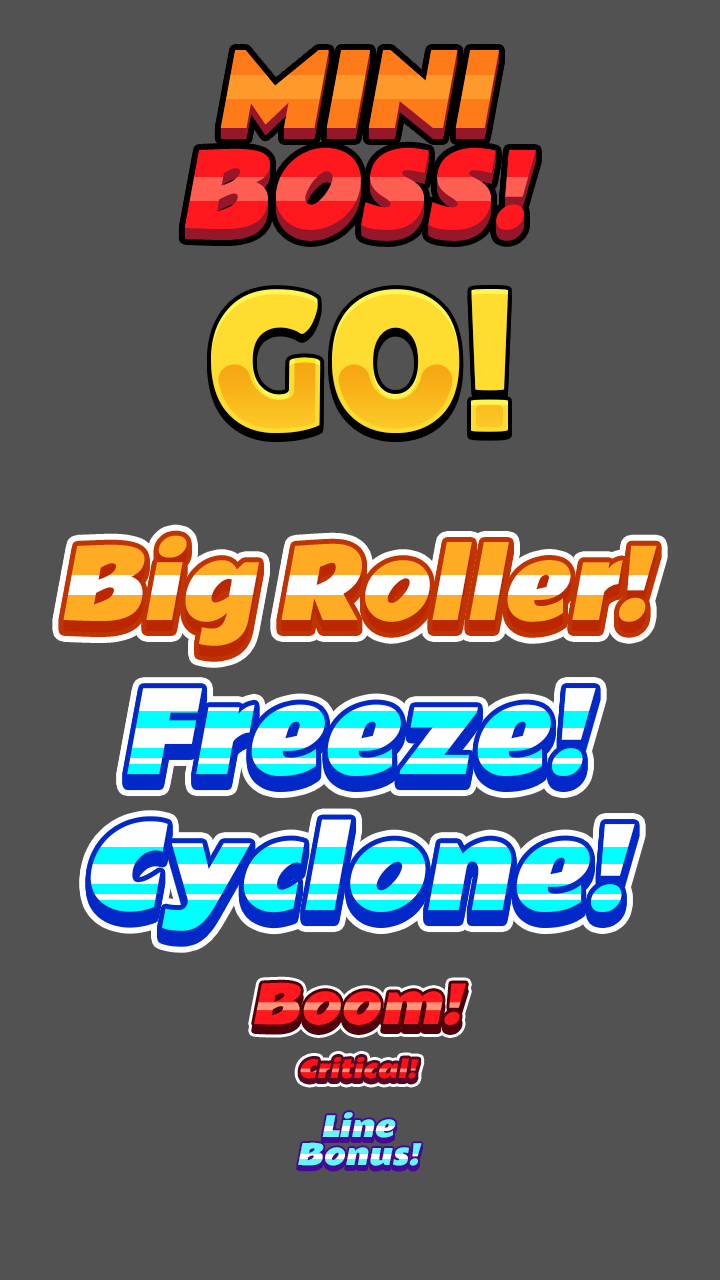
<style>
.page{position:relative;width:720px;height:1280px;background:#535253}
.page>*{position:absolute;margin:0}
.t1{font:100px/100px "RammettoOne-Regular";text-transform:uppercase;font-style:italic;scale:0.95 1}
.t2{font:100px/100px "RammettoOne-Regular";color:#ff191e;text-transform:uppercase;font-style:italic;scale:0.95 1}
.t3{font:100px/100px "RammettoOne-Regular";color:#ff7a19;text-transform:uppercase;font-style:italic;scale:0.95 1}
.t4{font:200.4px "LilitaOne";text-transform:uppercase}
.t5{font:200.4px "LilitaOne";color:#ffdc30;text-transform:uppercase}
.t6{font:95px "RammettoOne-Regular";font-style:italic;scale:0.95 1}
.t7{font:95px "RammettoOne-Regular";color:#ffab23;font-style:italic;scale:0.95 1}
.t8{font:110.1px "RammettoOne-Regular";font-style:italic;scale:0.95 1}
.t9{font:52px "RammettoOne-Regular";color:#ff191e;font-style:italic}
.t10{font:23.8px "RammettoOne-Regular";font-style:italic}
.t11{font:23.8px "RammettoOne-Regular";color:#fe1015;font-style:italic}
.t12{font:28px "RammettoOne-Regular";font-style:italic}
.t13{font:28px "RammettoOne-Regular";color:#63f7f9;font-style:italic}
</style>
<div class="page">
<p class="t1" style="left:184px;top:54px;width:352px;height:180px;text-align:center">Mini<br>Boss!</p>
<p class="t1" style="left:184px;top:53px;width:352px;height:180px;text-align:center">Mini<br>Boss!</p>
<p class="t1" style="left:184px;top:51px;width:352px;height:180px;text-align:center">Mini<br>Boss!</p>
<p class="t1" style="left:184px;top:52px;width:352px;height:180px;text-align:center">Mini<br>Boss!</p>
<p class="t2" style="left:184px;top:50px;width:352px;height:180px;text-align:center"><span class="t3">Mini<br></span>Boss!</p>
<p class="t1" style="left:184px;top:61px;width:352px;height:180px;text-align:center">Mini<br>Boss!</p>
<p class="t1" style="left:184px;top:60px;width:352px;height:180px;text-align:center">Mini<br>Boss!</p>
<p class="t1" style="left:184px;top:59px;width:352px;height:180px;text-align:center">Mini<br>Boss!</p>
<p class="t1" style="left:184px;top:58px;width:352px;height:180px;text-align:center">Mini<br>Boss!</p>
<p class="t1" style="left:184px;top:57px;width:352px;height:180px;text-align:center">Mini<br>Boss!</p>
<p class="t1" style="left:184px;top:56px;width:352px;height:180px;text-align:center">Mini<br>Boss!</p>
<p class="t1" style="left:184px;top:55px;width:352px;height:180px;text-align:center">Mini<br>Boss!</p>
<p class="t4" style="left:211px;top:294px;width:297px;height:144px">Go!</p>
<p class="t5" style="left:211px;top:289px;width:297px;height:144px">Go!</p>
<p class="t6" style="left:63px;top:545px;width:594px;height:111px">Big Roller!</p>
<p class="t6" style="left:63px;top:544px;width:594px;height:111px">Big Roller!</p>
<p class="t6" style="left:63px;top:543px;width:594px;height:111px">Big Roller!</p>
<p class="t6" style="left:63px;top:542px;width:594px;height:111px">Big Roller!</p>
<p class="t6" style="left:63px;top:541px;width:594px;height:111px">Big Roller!</p>
<p class="t6" style="left:63px;top:540px;width:594px;height:111px">Big Roller!</p>
<p class="t6" style="left:63px;top:539px;width:594px;height:111px">Big Roller!</p>
<p class="t6" style="left:63px;top:538px;width:594px;height:111px">Big Roller!</p>
<p class="t6" style="left:63px;top:536px;width:594px;height:111px">Big Roller!</p>
<p class="t6" style="left:63px;top:537px;width:594px;height:111px">Big Roller!</p>
<p class="t7" style="left:63px;top:535px;width:594px;height:111px">Big Roller!</p>
<p class="t6" style="left:63px;top:546px;width:594px;height:111px">Big Roller!</p>
<p class="t8" style="left:127px;top:689px;width:469px;height:88px">Freeze!</p>
<p class="t8" style="left:127px;top:688px;width:469px;height:88px">Freeze!</p>
<p class="t8" style="left:127px;top:695px;width:469px;height:88px">Freeze!</p>
<p class="t8" style="left:127px;top:694px;width:469px;height:88px">Freeze!</p>
<p class="t8" style="left:127px;top:693px;width:469px;height:88px">Freeze!</p>
<p class="t8" style="left:127px;top:692px;width:469px;height:88px">Freeze!</p>
<p class="t8" style="left:127px;top:691px;width:469px;height:88px">Freeze!</p>
<p class="t8" style="left:127px;top:690px;width:469px;height:88px">Freeze!</p>
<p class="t8" style="left:90px;top:822px;width:545px;height:112px">Cyclone!</p>
<p class="t8" style="left:90px;top:820px;width:545px;height:112px">Cyclone!</p>
<p class="t8" style="left:90px;top:821px;width:545px;height:112px">Cyclone!</p>
<p class="t8" style="left:90px;top:819px;width:545px;height:112px">Cyclone!</p>
<p class="t8" style="left:90px;top:830px;width:545px;height:112px">Cyclone!</p>
<p class="t8" style="left:90px;top:829px;width:545px;height:112px">Cyclone!</p>
<p class="t8" style="left:90px;top:828px;width:545px;height:112px">Cyclone!</p>
<p class="t8" style="left:90px;top:827px;width:545px;height:112px">Cyclone!</p>
<p class="t8" style="left:90px;top:826px;width:545px;height:112px">Cyclone!</p>
<p class="t8" style="left:90px;top:825px;width:545px;height:112px">Cyclone!</p>
<p class="t8" style="left:90px;top:824px;width:545px;height:112px">Cyclone!</p>
<p class="t8" style="left:90px;top:823px;width:545px;height:112px">Cyclone!</p>
<p class="t9" style="left:254px;top:982px;width:212px;height:43px">Boom!</p>
<p class="t10" style="left:300px;top:1060px;width:119px;height:22px">Critical!</p>
<p class="t11" style="left:300px;top:1057px;width:119px;height:22px">Critical!</p>
<p class="t12" style="left:322px;top:1116px;width:74px;height:26px">Line</p>
<p class="t13" style="left:322px;top:1112px;width:74px;height:26px">Line</p>
<p class="t13" style="left:298px;top:1142px;width:124px;height:24px">Bonus!</p>
<p class="t12" style="left:298px;top:1146px;width:124px;height:24px">Bonus!</p>
</div>
